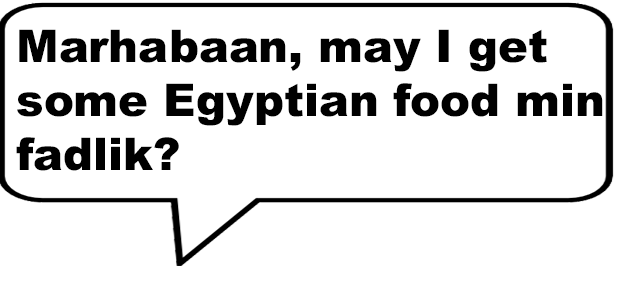
<style>
.page{position:relative;width:622px;height:284px;background:#ffffff}
.page>*{position:absolute;margin:0}
.t1{font:44.9px "Arial-Black";color:#000000}
</style>
<div class="page">
<p class="t1" style="left:16px;top:29px;width:587px;height:142px">Marhabaan, may I get some Egyptian food min fadlik?</p>
</div>
